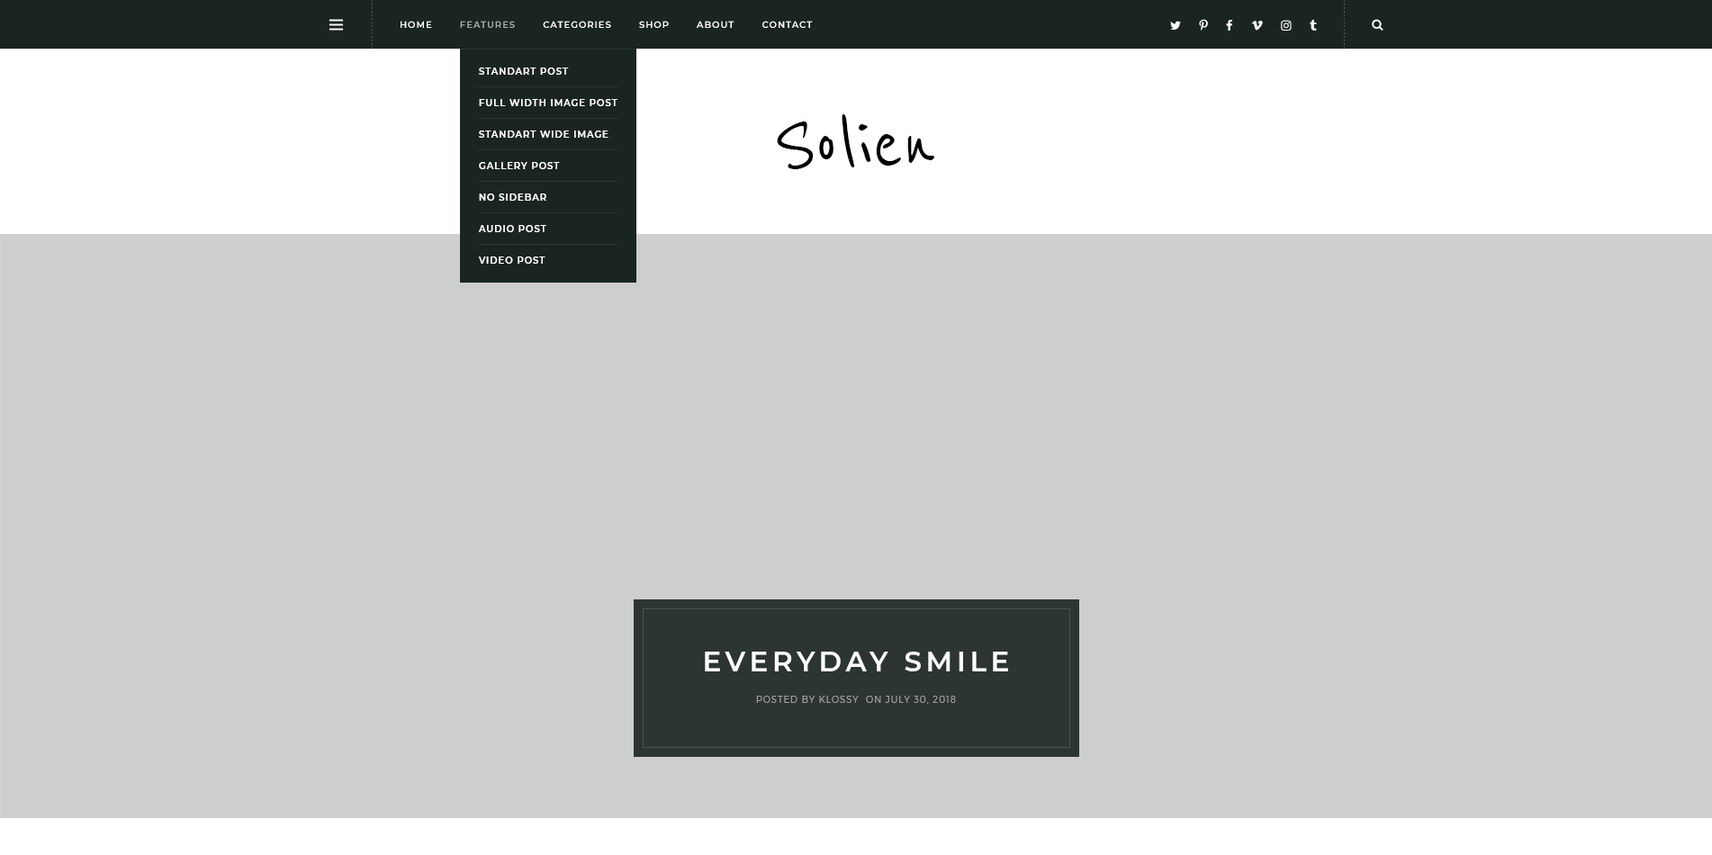
<style>
.page{position:relative;width:1712px;height:855px;background:#cdced0}
.page>*{position:absolute;margin:0}
.t1{font:9px "Montserrat-SemiBold";letter-spacing:0.1em;color:#ffffff;text-transform:uppercase}
.t2{font:9px "Montserrat-SemiBold";letter-spacing:0.1em;color:#aaadad;text-transform:uppercase}
.t3{font:9px/31.5px "Montserrat-SemiBold";letter-spacing:0.1em;color:#ffffff;text-transform:uppercase}
.t4{font:90px "ReenieBeanie";color:#000000}
.t5{font:27.9px "Montserrat-SemiBold";letter-spacing:0.15em;color:#ffffff;text-transform:uppercase}
.t6{font:9px "Montserrat-Light";letter-spacing:0.1em;color:#a0a1a2;text-transform:uppercase}
</style>
<div class="page">
<p class="t1" style="left:400px;top:21px;width:413px;height:7px">Home        <span class="t2">Features</span>        Categories        Shop        About        Contact</p>
<p class="t3" style="left:478px;top:68px;width:139px;height:196px">Standart Post<br>Full Width image Post<br>Standart Wide Image<br>Gallery Post<br>No Sidebar<br>Audio Post<br>Video Post</p>
<p class="t4" style="left:777px;top:114px;width:157px;height:55px">Solien</p>
<p class="t5" style="left:705px;top:652px;width:303px;height:19px">Everyday Smile</p>
<p class="t6" style="left:756px;top:696px;width:200px;height:8px">Posted by Klossy  on July 30, 2018</p>
</div>
